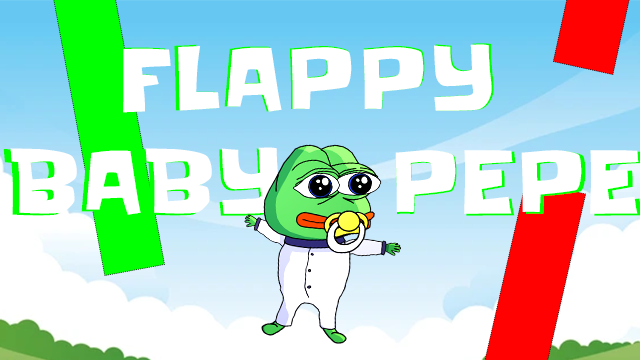
<style>
.page{position:relative;width:640px;height:360px;background:#ffffff}
.page>*{position:absolute;margin:0}
.t1{font:85.7px "Slackey-Regular";color:#ffffff}
</style>
<div class="page">
<p class="t1" style="left:10px;top:44px;width:629px;height:171px;text-align:center">FLAPPY <br>BABY   PEPE</p>
</div>
